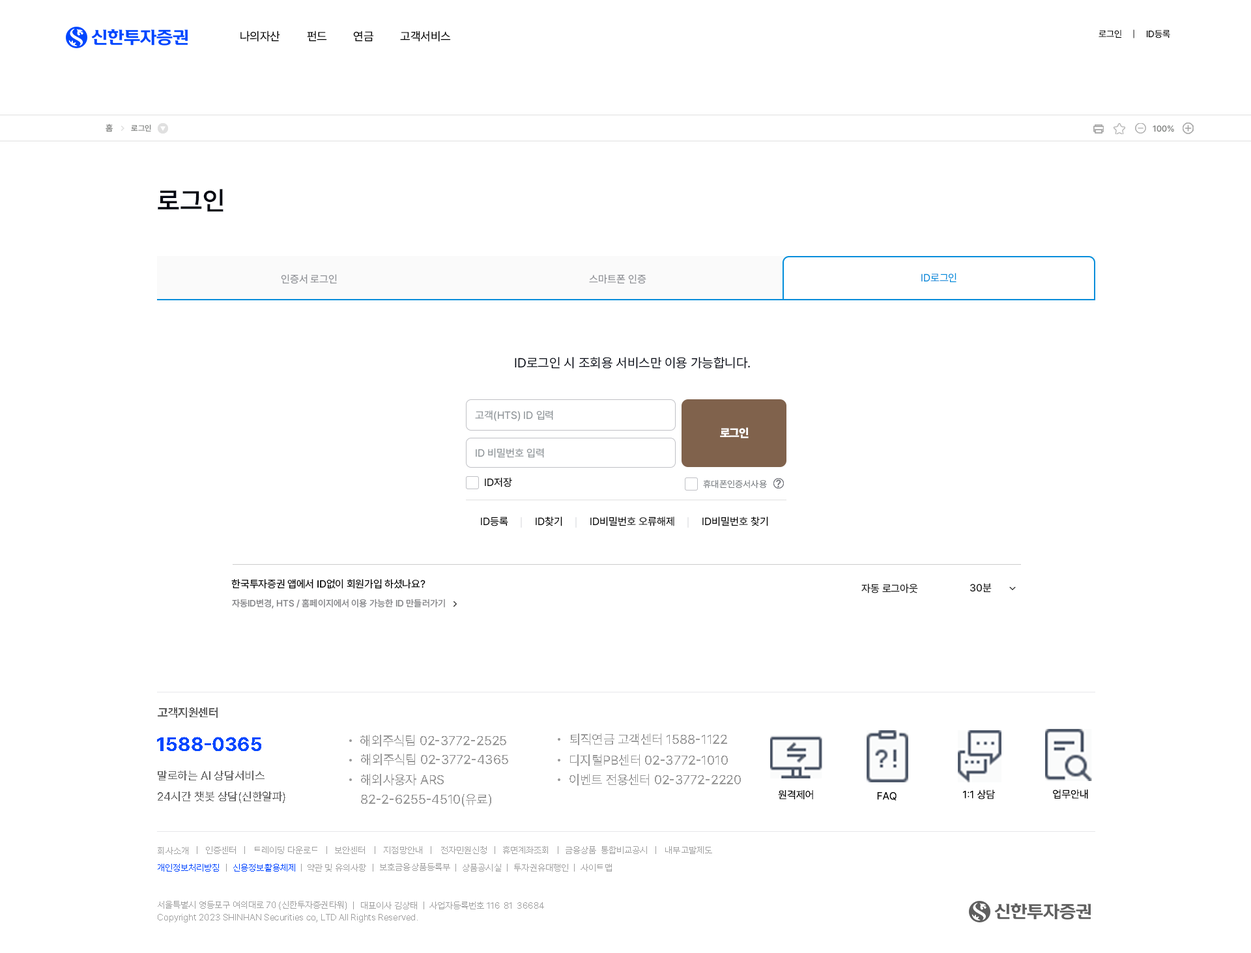
<style>
.page{position:relative;width:1251px;height:953px;background:#ffffff}
.page>*{position:absolute;margin:0}
.t1{font:9.1px "Pretendard-Regular";color:#000000}
.t2{font:11.7px "Pretendard-Regular";color:#000000}
.t3{font:8.5px "Pretendard-Medium";color:#828482}
.t4{font:7.8px "Pretendard-Medium";color:#828482}
.t5{font:26.1px "Pretendard-SemiBold";color:#000411}
.t6{font:10.4px "Pretendard-Regular";color:#8e9095}
.t7{font:10.4px "Pretendard-Regular";color:#008ddb}
.t8{font:13px "Pretendard-Regular";color:#000411}
.t9{font:10.4px "Pretendard-Regular";color:#8e9498}
.t10{font:11.7px "Pretendard-Black";letter-spacing:-0.05em;color:#ffffff}
.t11{font:10.4px "Pretendard-Regular";color:#000000}
.t12{font:9.1px "Pretendard-Regular";color:#7e8286}
.t13{font:10.4px "Pretendard-Regular";color:#73757c}
.t14{font:10.4px "Pretendard-Medium";letter-spacing:-0.01em;color:#000000}
.t15{font:10.4px "Pretendard-Medium";letter-spacing:-0.01em;color:#222222}
.t16{font:10.4px "Pretendard-Medium";color:#222222}
.t17{font:9.1px "Pretendard-Medium";color:#828386}
.t18{font:11.7px "Pretendard-Bold";color:#666666}
.t19{font:19.5px "Pretendard-Bold";color:#0046ff}
.t20{font:13px "Pretendard-Regular";color:#999999}
.t21{font:11.7px "Pretendard-Regular";color:#666666}
.t22{font:9.1px "Pretendard-Light";color:#9f9f9f}
.t23{font:9.1px "Pretendard-Light";color:#0046ff}
</style>
<div class="page">
<p class="t1" style="left:1099px;top:29px;width:71px;height:9px">로그인　 |　 ID등록</p>
<p class="t2" style="left:240px;top:31px;width:211px;height:11px">나의자산         펀드         연금         고객서비스</p>
<p class="t3" style="left:106px;top:124px;width:7px;height:8px">홈</p>
<p class="t4" style="left:131px;top:124px;width:20px;height:8px">로그인</p>
<p class="t3" style="left:1153px;top:125px;width:21px;height:7px">100%</p>
<p class="t5" style="left:158px;top:189px;width:65px;height:23px">로그인</p>
<p class="t6" style="left:281px;top:274px;width:56px;height:10px">인증서 로그인</p>
<p class="t6" style="left:589px;top:274px;width:57px;height:10px">스마트폰 인증</p>
<p class="t7" style="left:921px;top:273px;width:35px;height:10px">ID로그인</p>
<p class="t8" style="left:515px;top:357px;width:235px;height:12px">ID로그인 시 조회용 서비스만 이용 가능합니다.</p>
<p class="t9" style="left:475px;top:410px;width:78px;height:12px">고객(HTS) ID 입력</p>
<p class="t10" style="left:720px;top:427px;width:29px;height:11px">로그인</p>
<p class="t9" style="left:476px;top:448px;width:68px;height:10px">ID 비밀번호 입력</p>
<p class="t11" style="left:485px;top:478px;width:27px;height:9px">ID저장</p>
<p class="t12" style="left:703px;top:480px;width:64px;height:9px">휴대폰인증서사용</p>
<p class="t13" style="left:776px;top:480px;width:5px;height:8px">?</p>
<p class="t13" style="left:776px;top:480px;width:5px;height:8px">?</p>
<p class="t11" style="left:481px;top:517px;width:27px;height:9px">ID등록</p>
<p class="t11" style="left:536px;top:517px;width:26px;height:9px">ID찾기</p>
<p class="t11" style="left:590px;top:517px;width:84px;height:9px">ID비밀번호 오류해제</p>
<p class="t11" style="left:702px;top:517px;width:66px;height:9px">ID비밀번호 찾기</p>
<p class="t14" style="left:231px;top:579px;width:194px;height:10px">한국투자증권 앱에서 ID없이 회원가입 하셨나요?</p>
<p class="t15" style="left:861px;top:584px;width:57px;height:10px">자동 로그아웃</p>
<p class="t16" style="left:970px;top:583px;width:22px;height:9px">30분</p>
<p class="t17" style="left:232px;top:599px;width:213px;height:10px">자동ID변경, HTS / 홈페이지에서 이용 가능한 ID 만들러가기</p>
<p class="t18" style="left:158px;top:708px;width:60px;height:10px">고객지원센터</p>
<p class="t19" style="left:157px;top:737px;width:104px;height:14px">1588-0365</p>
<p class="t20" style="left:360px;top:735px;width:146px;height:12px">해외주식팀 02-3772-2525</p>
<p class="t20" style="left:570px;top:734px;width:157px;height:11px">퇴직연금 고객센터 1588-1122</p>
<p class="t20" style="left:361px;top:754px;width:147px;height:12px">해외주식팀 02-3772-4365</p>
<p class="t20" style="left:570px;top:754px;width:158px;height:12px">디지털PB센터 02-3772-1010</p>
<p class="t21" style="left:158px;top:771px;width:107px;height:10px">말로하는 AI 상담서비스</p>
<p class="t20" style="left:361px;top:774px;width:83px;height:12px">해외사용자 ARS</p>
<p class="t20" style="left:569px;top:774px;width:172px;height:12px">이벤트 전용센터 02-3772-2220</p>
<p class="t21" style="left:158px;top:792px;width:127px;height:11px">24시간 챗봇 상담(신한알파)</p>
<p class="t20" style="left:361px;top:794px;width:130px;height:13px">82-2-6255-4510(유료)</p>
<p class="t11" style="left:778px;top:790px;width:35px;height:9px">원격제어</p>
<p class="t11" style="left:877px;top:792px;width:20px;height:9px">FAQ</p>
<p class="t11" style="left:963px;top:790px;width:32px;height:9px">1:1 상담</p>
<p class="t11" style="left:1053px;top:790px;width:35px;height:9px">업무안내</p>
<p class="t22" style="left:158px;top:847px;width:30px;height:8px">회사소개</p>
<p class="t22" style="left:206px;top:846px;width:30px;height:8px">인증센터</p>
<p class="t22" style="left:255px;top:846px;width:62px;height:8px">트레이딩 다운로드</p>
<p class="t22" style="left:335px;top:846px;width:30px;height:8px">보안센터</p>
<p class="t22" style="left:384px;top:846px;width:38px;height:8px">지점망안내</p>
<p class="t22" style="left:441px;top:846px;width:46px;height:8px">전자민원신청</p>
<p class="t22" style="left:503px;top:846px;width:45px;height:8px">휴면계좌조회</p>
<p class="t22" style="left:566px;top:846px;width:81px;height:8px">금융상품  통합비교공시</p>
<p class="t22" style="left:665px;top:846px;width:47px;height:8px">내부고발제도</p>
<p class="t23" style="left:158px;top:864px;width:61px;height:8px">개인정보처리방침</p>
<p class="t23" style="left:233px;top:864px;width:62px;height:8px">신용정보활용체제</p>
<p class="t22" style="left:308px;top:864px;width:58px;height:8px">약관 및 유의사항</p>
<p class="t22" style="left:380px;top:863px;width:70px;height:8px">보호금융상품등록부</p>
<p class="t22" style="left:463px;top:864px;width:38px;height:8px">상품공시실</p>
<p class="t22" style="left:514px;top:864px;width:54px;height:8px">투자권유대행인</p>
<p class="t22" style="left:581px;top:864px;width:31px;height:8px">사이트맵</p>
<p class="t22" style="left:158px;top:901px;width:189px;height:9px">서울특별시 영등포구 여의대로 70 (신한투자증권타워)</p>
<p class="t22" style="left:361px;top:902px;width:56px;height:8px">대표이사 김상태</p>
<p class="t22" style="left:429px;top:902px;width:115px;height:8px">사업자등록번호 116-81-36684</p>
<p class="t22" style="left:158px;top:914px;width:260px;height:9px">Copyright 2023 SHINHAN Securities co, LTD All Rights Reserved.</p>
</div>
